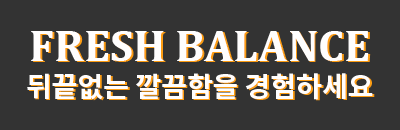
<style>
.page{position:relative;width:400px;height:130px;background:#333333}
.page>*{position:absolute;margin:0}
.t1{font:28px/36px "NotoSansKR-Bold";color:#fffefe}
.t2{font:45px/36px "Cambria-Bold";color:#fffefe}
.t3{font:45px "Cambria-Bold"}
.t4{font:28px "NotoSansKR-Bold"}
</style>
<div class="page">
<p class="t1" style="left:27px;top:31px;width:346px;height:69px;text-align:center"><span class="t2">FRESH BALANCE<br></span>뒤끝없는 깔끔함을 경험하세요</p>
<p class="t3" style="left:33px;top:32px;width:338px;height:30px">FRESH BALANCE</p>
<p class="t4" style="left:28px;top:74px;width:347px;height:27px">뒤끝없는 깔끔함을 경험하세요</p>
</div>
